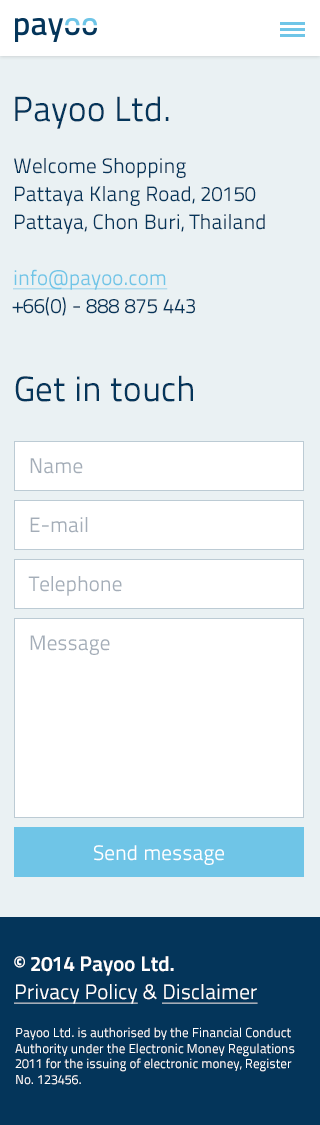
<style>
.page{position:relative;width:320px;height:1125px;background:#eaf1f3}
.page>*{position:absolute;margin:0}
.t1{font:35px "TitilliumText25L-400wt";color:#04355a}
.t2{font:21px/28px "TitilliumText25L-400wt";color:#04355a}
.t3{font:21px/28px "TitilliumText25L-400wt";color:#6fc5e7;text-decoration:underline}
.t4{font:21px "TitilliumText25L-400wt";color:#a4adb8}
.t5{font:21px "TitilliumText25L-400wt";color:#ffffff}
.t6{font:21px/28px "TitilliumText25L-800wt";color:#ffffff}
.t7{font:21px/28px "TitilliumText25L-400wt";color:#ffffff;text-decoration:underline}
.t8{font:21px/28px "TitilliumText25L-400wt";color:#ffffff}
.t9{font:13px "TitilliumText25L-400wt";color:#ffffff}
</style>
<div class="page">
<p class="t1" style="left:15px;top:96px;width:154px;height:33px">Payoo Ltd.</p>
<p class="t2" style="left:12px;top:158px;width:253px;height:158px">Welcome Shopping <br>Pattaya Klang Road, 20150<br>Pattaya, Chon Buri, Thailand<br><br><span class="t3">info@payoo.com<br></span>+66(0) - 888 875 443</p>
<p class="t1" style="left:15px;top:375px;width:178px;height:27px">Get in touch</p>
<p class="t4" style="left:30px;top:458px;width:53px;height:16px">Name</p>
<p class="t4" style="left:30px;top:517px;width:58px;height:16px">E-mail</p>
<p class="t4" style="left:28px;top:576px;width:94px;height:20px">Telephone</p>
<p class="t4" style="left:30px;top:635px;width:80px;height:20px">Message</p>
<p class="t5" style="left:94px;top:845px;width:130px;height:20px">Send message</p>
<p class="t6" style="left:14px;top:956px;width:244px;height:48px">© 2014 Payoo Ltd.<br><span class="t7">Privacy Policy</span><span class="t8"> &amp; </span><span class="t7">Disclaimer</span></p>
<p class="t9" style="left:15px;top:1027px;width:280px;height:58px">Payoo Ltd. is authorised by the Financial Conduct Authority under the Electronic Money Regulations 2011 for the issuing of electronic money, Register No. 123456.</p>
</div>
